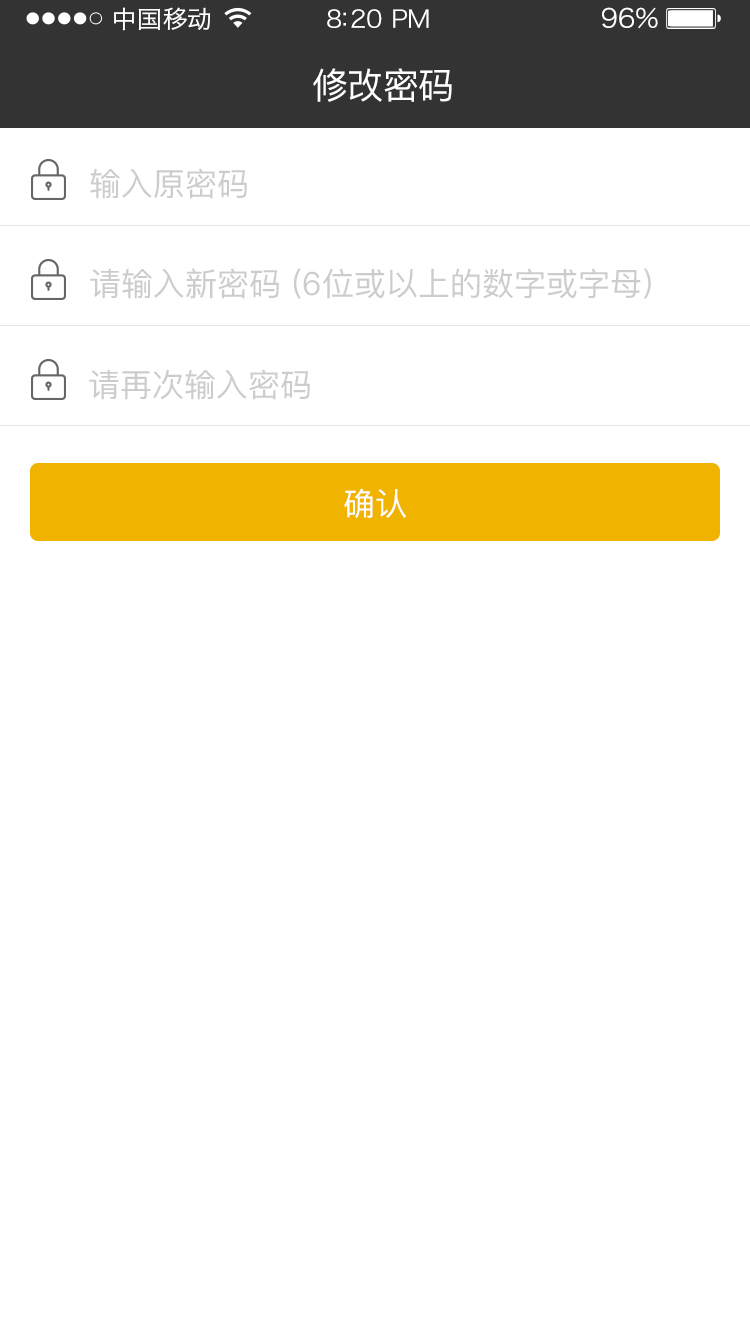
<style>
.page{position:relative;width:750px;height:1334px;background:#ffffff}
.page>*{position:absolute;margin:0}
.t1{font:24px "HiraginoSansGB-W3";letter-spacing:0.02em;color:#ffffff;scale:1.03 1}
.t2{font:24px "HiraginoSansGB-W3";letter-spacing:-0.02em;color:#ffffff;scale:1.03 1}
.t3{font:26.2px "HiraginoSansGB-W3";letter-spacing:-0.02em;color:#ffffff;scale:1.03 1}
.t4{font:36px "PingFangSC-Regular";letter-spacing:-0.02em;color:#ffffff}
.t5{font:32px "PingFangSC-Regular";color:#cccccc}
.t6{font:32px "PingFangSC-Regular";color:#ffffff}
</style>
<div class="page">
<p class="t1" style="left:114px;top:7px;width:97px;height:24px">中国移动</p>
<p class="t2" style="left:327px;top:9px;width:102px;height:19px">8:20 PM</p>
<p class="t3" style="left:602px;top:7px;width:56px;height:22px">96%</p>
<p class="t4" style="left:313px;top:68px;width:139px;height:34px">修改密码</p>
<p class="t5" style="left:90px;top:168px;width:157px;height:31px">输入原密码</p>
<p class="t5" style="left:90px;top:268px;width:561px;height:31px">请输入新密码 (6位或以上的数字或字母)</p>
<p class="t5" style="left:89px;top:369px;width:221px;height:31px">请再次输入密码</p>
<p class="t6" style="left:344px;top:488px;width:62px;height:30px">确认</p>
</div>
